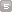
<style>
.page{position:relative;width:12px;height:12px;background:#aba5a5}
.page>*{position:absolute;margin:0}
.t1{font:8px "Kroeger0553";color:#ffffff}
</style>
<div class="page">
<p class="t1" style="left:4px;top:4px;width:5px;height:5px">5</p>
</div>
